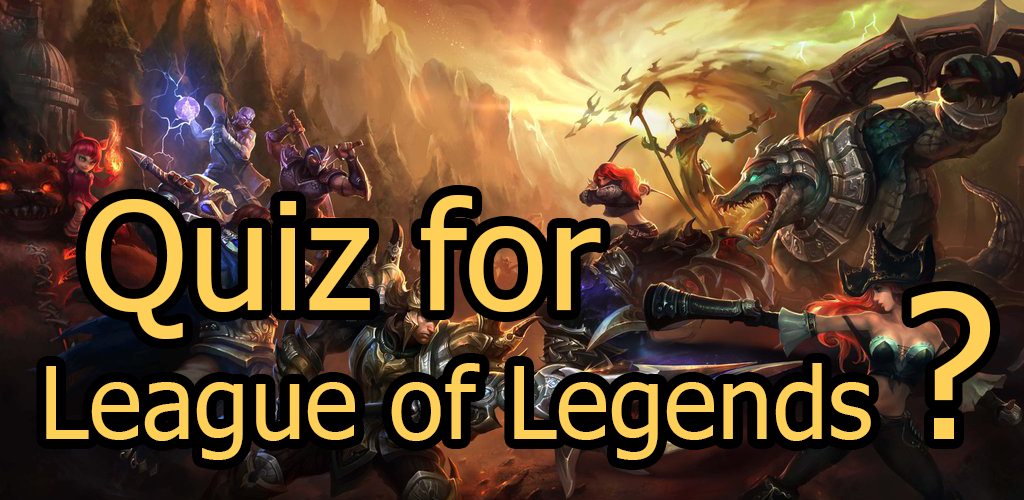
<style>
.page{position:relative;width:1024px;height:500px}
.page>*{position:absolute;margin:0}
.t1{font:150px "Tahoma";color:#ffd057}
.t2{font:200px "Tahoma";color:#ffd057}
.t3{font:100px "Tahoma";color:#ffd057}
</style>
<div class="page">
<p class="t1" style="left:85px;top:195px;width:516px;height:144px">Quiz for</p>
<p class="t2" style="left:911px;top:291px;width:80px;height:148px">?</p>
<p class="t3" style="left:46px;top:363px;width:825px;height:97px">League of Legends</p>
</div>
